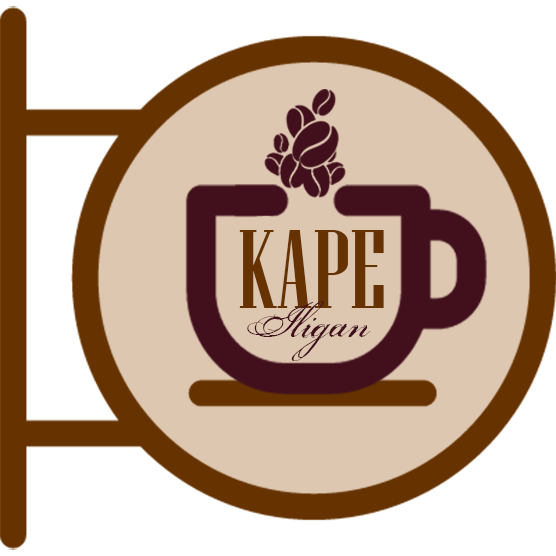
<style>
.page{position:relative;width:556px;height:556px;background:#ffffff}
.page>*{position:absolute;margin:0}
.t1{font:110.9px "NiagaraSolid-Reg";color:#663300;text-transform:uppercase;scale:1.15 1}
.t2{font:60.2px "Porcelain";color:#42101c}
</style>
<div class="page">
<p class="t1" style="left:239px;top:230px;width:145px;height:78px">Kape</p>
<p class="t2" style="left:247px;top:301px;width:124px;height:60px">Iligan</p>
</div>
